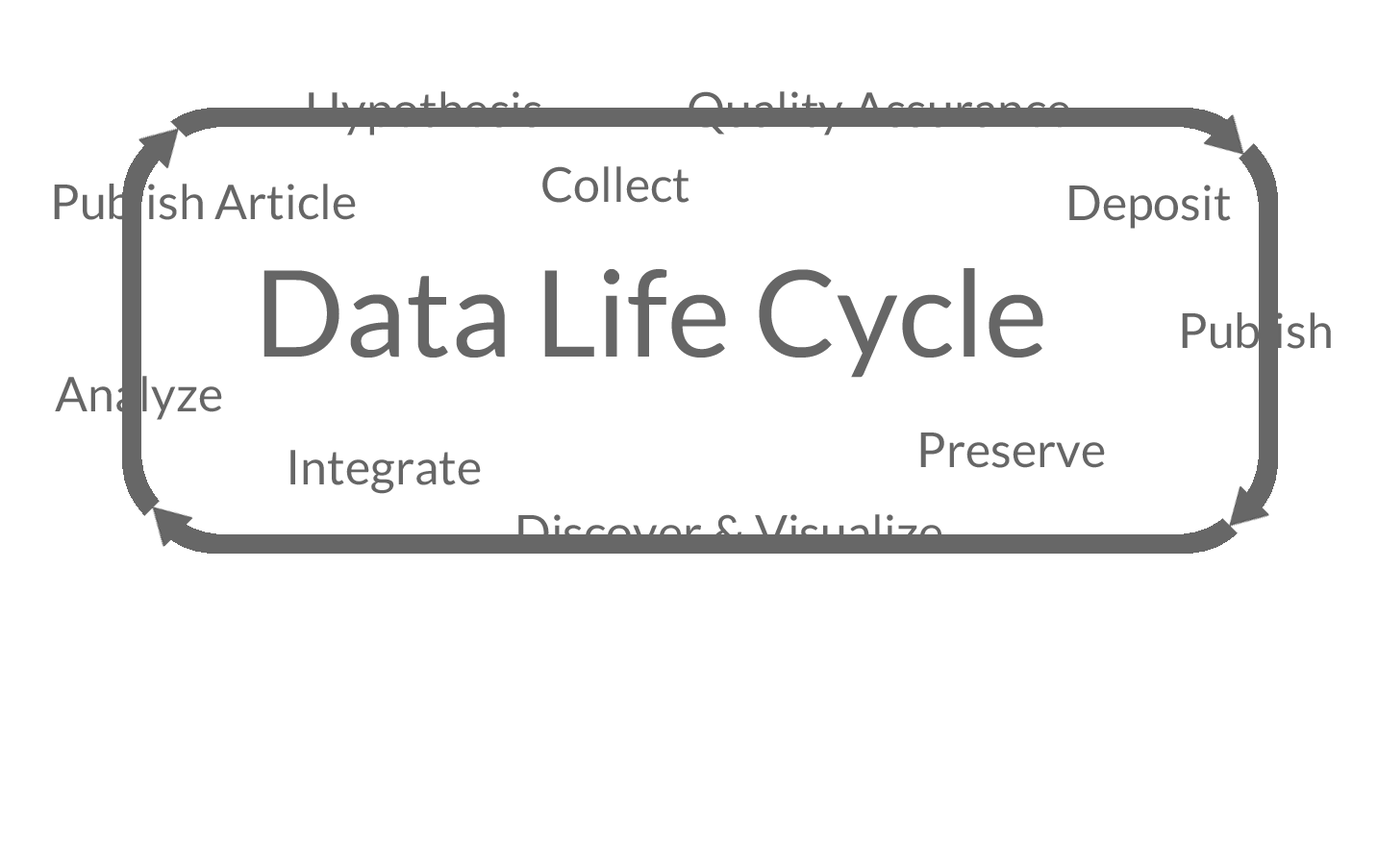
<style>
.page{position:relative;width:1378px;height:865px;background:#ffffff}
.page>*{position:absolute;margin:0}
.t1{font:48.1px "Lato-Regular";color:#666666}
.t2{font:120.2px "Lato-Regular";color:#666666}
</style>
<div class="page">
<p class="t1" style="left:309px;top:91px;width:232px;height:45px">Hypothesis</p>
<p class="t1" style="left:688px;top:91px;width:382px;height:45px">Quality Assurance</p>
<p class="t1" style="left:542px;top:166px;width:147px;height:37px">Collect</p>
<p class="t1" style="left:54px;top:184px;width:302px;height:36px">Publish Article</p>
<p class="t1" style="left:1069px;top:185px;width:162px;height:44px">Deposit</p>
<p class="t2" style="left:263px;top:268px;width:780px;height:110px">Data Life Cycle</p>
<p class="t1" style="left:1182px;top:313px;width:149px;height:36px">Publish</p>
<p class="t1" style="left:55px;top:376px;width:167px;height:44px">Analyze</p>
<p class="t1" style="left:920px;top:433px;width:185px;height:35px">Preserve</p>
<p class="t1" style="left:290px;top:450px;width:191px;height:44px">Integrate</p>
<p class="t1" style="left:518px;top:514px;width:424px;height:37px">Discover &amp; Visualize</p>
</div>
